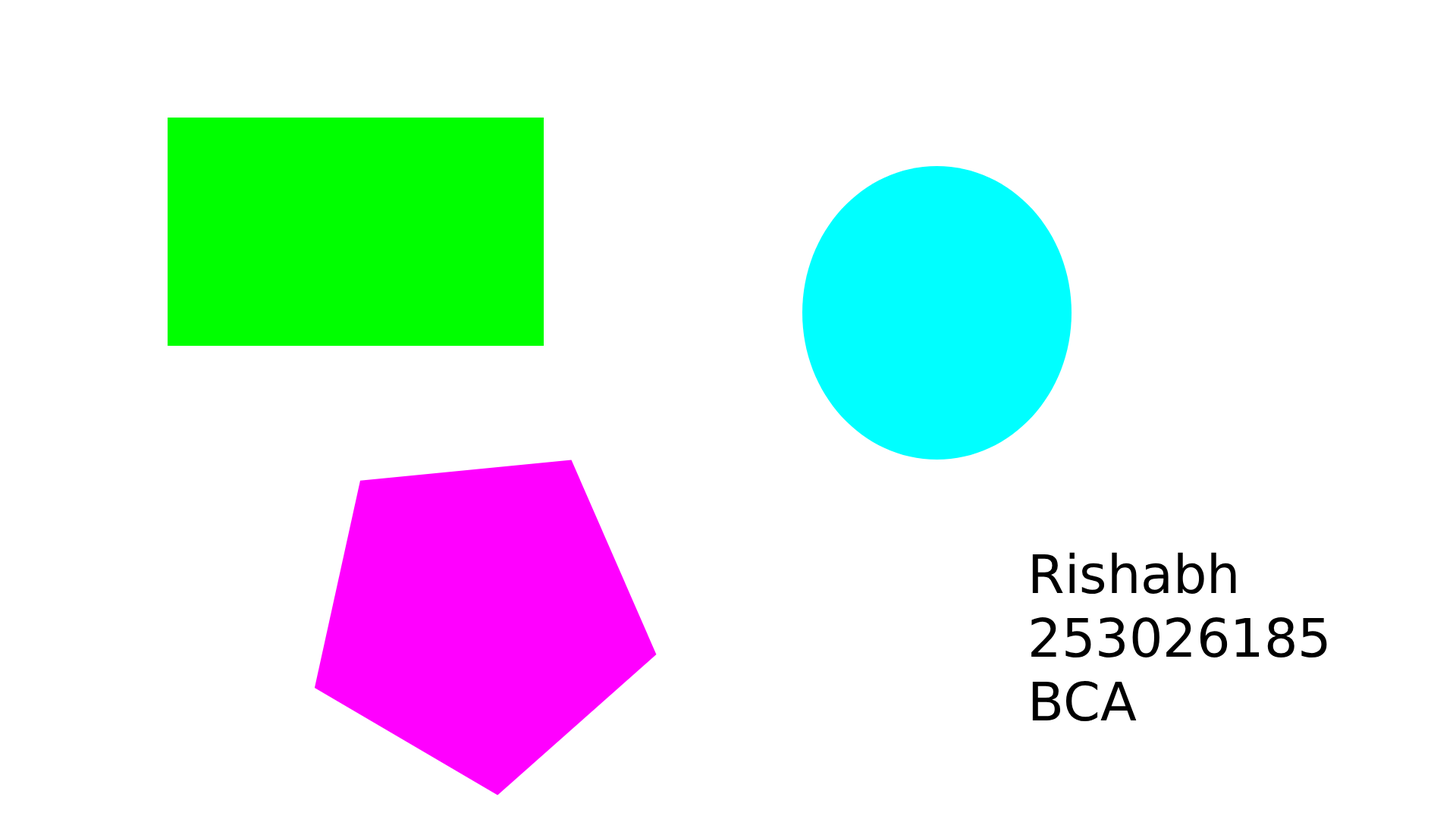
<style>
.page{position:relative;width:1456px;height:819px;background:#ffffff}
.page>*{position:absolute;margin:0}
.t1{font:53.1px "DejaVuSans";color:#000000}
</style>
<div class="page">
<p class="t1" style="left:1031px;top:552px;width:296px;height:169px">Rishabh <br>253026185<br>BCA</p>
</div>
